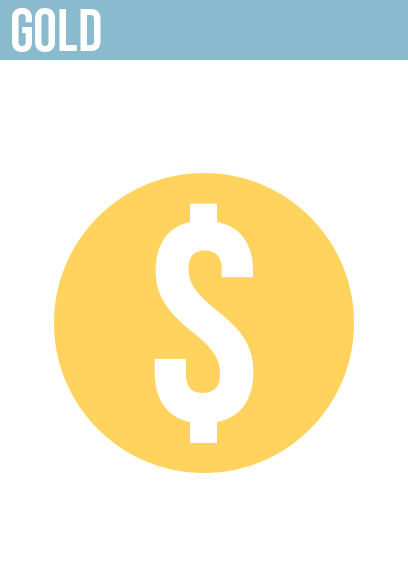
<style>
.page{position:relative;width:408px;height:585px;background:#ffffff}
.page>*{position:absolute;margin:0}
.t1{font:60px "BebasNeue-Regular";color:#ffffff}
.t2{font:300px "BebasNeue-Regular";color:#ffffff}
</style>
<div class="page">
<p class="t1" style="left:12px;top:8px;width:89px;height:44px">gold</p>
<p class="t2" style="left:154px;top:203px;width:100px;height:240px">$</p>
</div>
